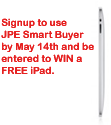
<style>
.page{position:relative;width:111px;height:125px;background:#ffffff}
.page>*{position:absolute;margin:0}
.t1{font:10px "ArialRoundedMTBold";color:#e62121}
</style>
<div class="page">
<p class="t1" style="left:1px;top:18px;width:93px;height:56px">Signup to use <br>JPE Smart Buyer<br>by May 14th and be<br>entered to WIN a <br>FREE iPad.</p>
</div>
